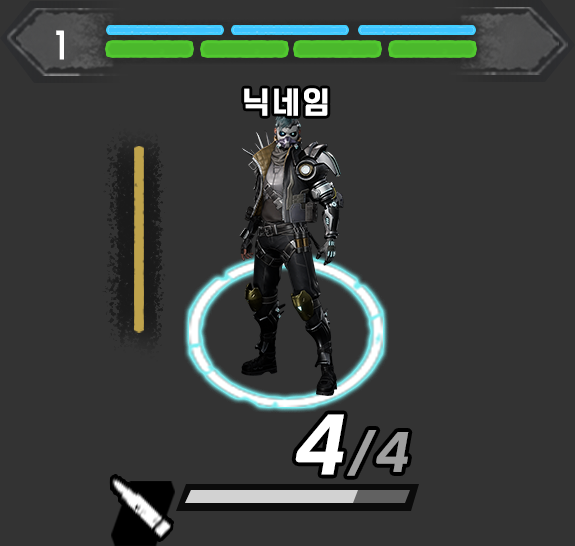
<style>
.page{position:relative;width:575px;height:546px;background:#333333}
.page>*{position:absolute;margin:0}
.t1{font:35px "SEBANGGothicBold";letter-spacing:0.1em;color:#ffffff;scale:0.73 1}
.t2{font:30px "SEBANGGothicBold";letter-spacing:0.1em;color:#ffffff}
.t3{font:48px "SEBANGGothicBold";letter-spacing:0.1em;color:#9f9f9f;font-style:italic}
.t4{font:72px "SEBANGGothicBold";letter-spacing:0.1em;color:#ffffff;font-style:italic}
</style>
<div class="page">
<p class="t1" style="left:56px;top:30px;width:8px;height:30px">1</p>
<p class="t2" style="left:244px;top:88px;width:84px;height:28px">닉네임</p>
<p class="t3" style="left:295px;top:414px;width:114px;height:62px"><span class="t4">4</span>/4</p>
</div>
